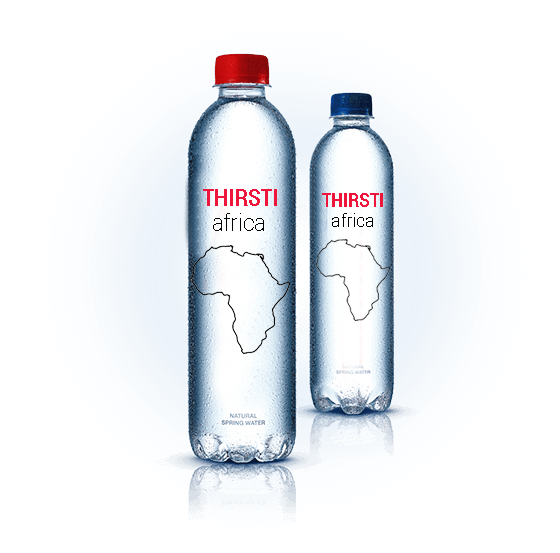
<style>
.page{position:relative;width:560px;height:553px;background:#ffffff}
.page>*{position:absolute;margin:0}
.t1{font:23.8px "Roboto-Bold";color:#ef163b;scale:0.86 1}
.t2{font:19.6px "Roboto-Bold";color:#ef163b;scale:0.86 1}
.t3{font:23px "Roboto-Thin";color:#040404}
.t4{font:18.2px "Roboto-Thin";color:#040404}
</style>
<div class="page">
<p class="t1" style="left:203px;top:189px;width:74px;height:17px">THIRSTI</p>
<p class="t2" style="left:322px;top:193px;width:61px;height:14px">THIRSTI</p>
<p class="t3" style="left:213px;top:213px;width:51px;height:18px">africa</p>
<p class="t4" style="left:332px;top:213px;width:41px;height:14px">africa</p>
</div>
